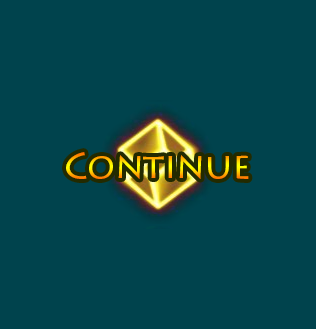
<style>
.page{position:relative;width:316px;height:329px;background:#00434d}
.page>*{position:absolute;margin:0}
.t1{font:36px "LithosPro-Regular"}
</style>
<div class="page">
<p class="t1" style="left:66px;top:152px;width:183px;height:27px">Continue</p>
</div>
